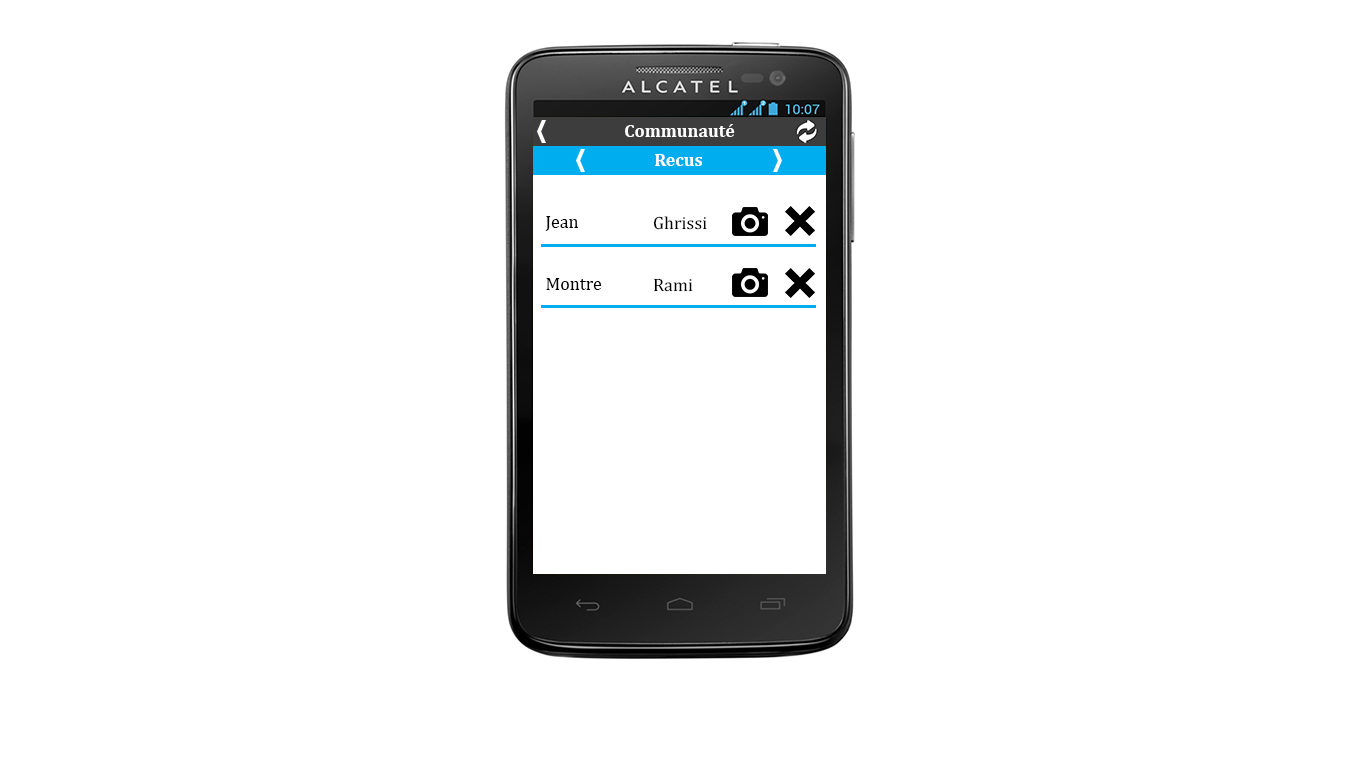
<style>
.page{position:relative;width:1366px;height:768px;background:#ffffff}
.page>*{position:absolute;margin:0}
.t1{font:18px "Cambria-Bold";color:#ffffff}
.t2{font:18px "Cambria";color:#000000}
</style>
<div class="page">
<p class="t1" style="left:625px;top:124px;width:110px;height:13px">Communauté</p>
<p class="t1" style="left:655px;top:154px;width:47px;height:12px">Recus</p>
<p class="t2" style="left:545px;top:216px;width:33px;height:15px">Jean</p>
<p class="t2" style="left:653px;top:216px;width:54px;height:14px">Ghrissi</p>
<p class="t2" style="left:546px;top:278px;width:56px;height:12px">Montre</p>
<p class="t2" style="left:654px;top:278px;width:39px;height:14px">Rami</p>
</div>
